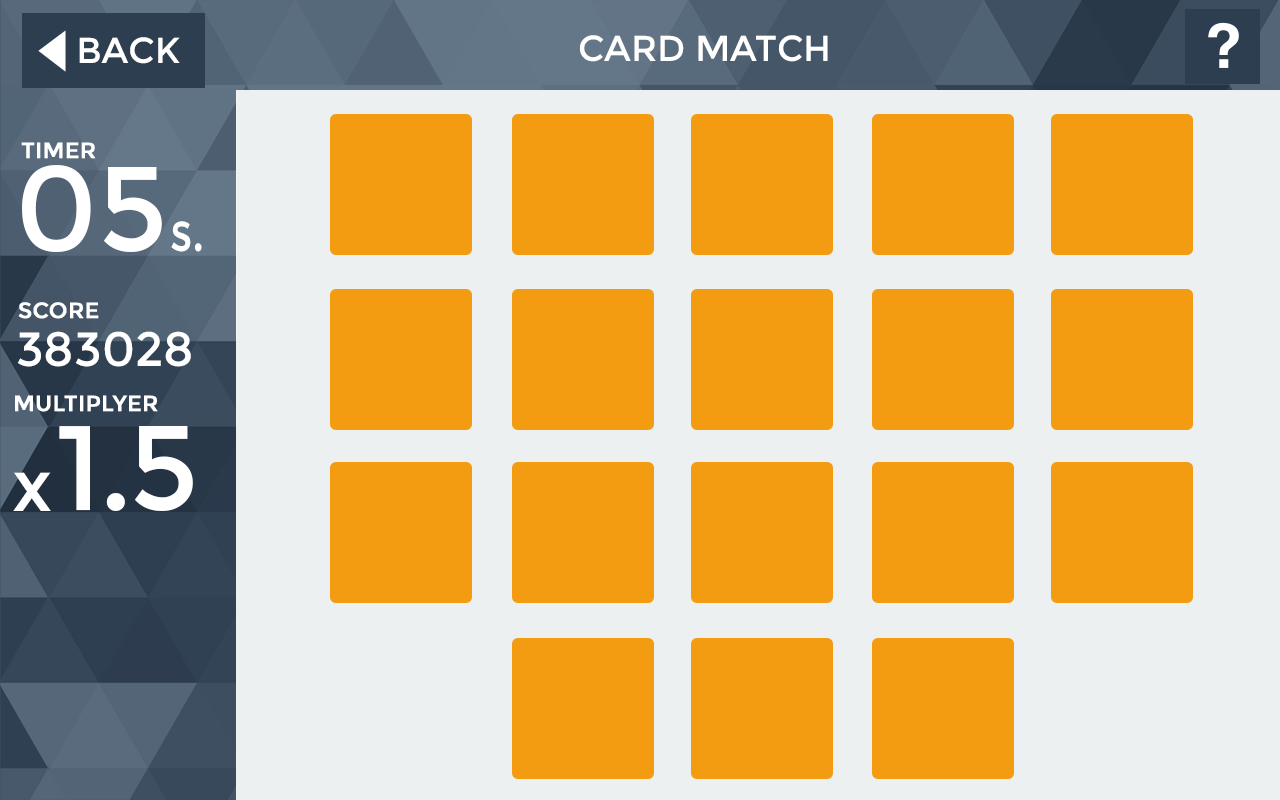
<style>
.page{position:relative;width:1280px;height:800px;background:#ecf0f1}
.page>*{position:absolute;margin:0}
.t1{font:36px "Montserrat-Regular";color:#ffffff}
.t2{font:36px "Montserrat-Regular";color:#ffffff;text-transform:uppercase}
.t3{font:22px "Montserrat-Regular";color:#ffffff;font-weight:bold}
.t4{font:120px "Montserrat-Regular";color:#ffffff}
.t5{font:55px "Montserrat-Regular";color:#ffffff;scale:0.8 1}
.t6{font:48px "Montserrat-Regular";color:#ffffff}
.t7{font:120px "Montserrat-Regular";letter-spacing:-0.025em;color:#ffffff}
.t8{font:72px "Montserrat-Regular";color:#ffffff}
</style>
<div class="page">
<p class="t1" style="left:79px;top:37px;width:101px;height:27px">BACK</p>
<p class="t2" style="left:579px;top:35px;width:249px;height:27px">CARD MATCH</p>
<p class="t3" style="left:21px;top:142px;width:75px;height:17px">TIMER</p>
<p class="t4" style="left:22px;top:165px;width:140px;height:87px">05</p>
<p class="t5" style="left:171px;top:221px;width:31px;height:31px">s.</p>
<p class="t3" style="left:18px;top:302px;width:81px;height:17px">SCORE</p>
<p class="t6" style="left:17px;top:331px;width:174px;height:36px">383028</p>
<p class="t3" style="left:15px;top:395px;width:143px;height:17px">MULTIPLYER</p>
<p class="t7" style="left:59px;top:426px;width:134px;height:85px">1.5</p>
<p class="t8" style="left:13px;top:472px;width:38px;height:39px">x</p>
</div>
